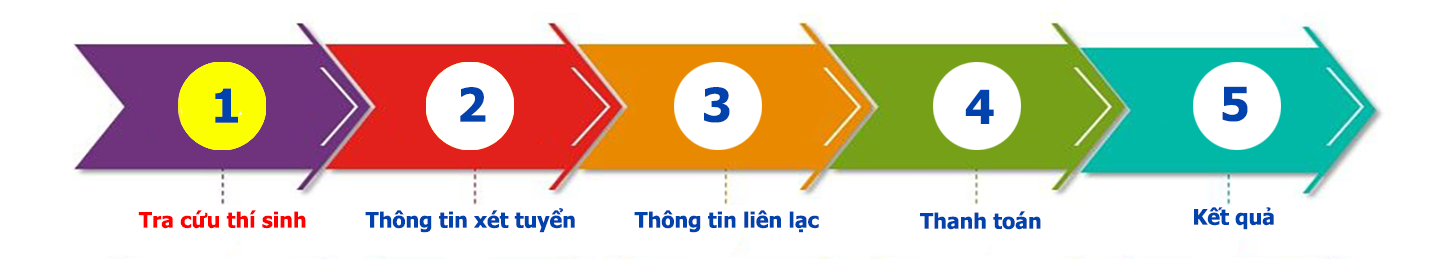
<style>
.page{position:relative;width:1434px;height:259px;background:#ffffff}
.page>*{position:absolute;margin:0}
.t1{font:46.7px "Tahoma-Bold";color:#0242ac}
.t2{font:21.3px "Tahoma-Bold";color:#0242ac}
.t3{font:21.3px "Tahoma-Bold";color:#ff0000}
</style>
<div class="page">
<p class="t1" style="left:215px;top:88px;width:23px;height:35px">1</p>
<p class="t1" style="left:460px;top:87px;width:26px;height:35px">2</p>
<p class="t1" style="left:704px;top:87px;width:26px;height:36px">3</p>
<p class="t1" style="left:965px;top:89px;width:29px;height:35px">4</p>
<p class="t1" style="left:1222px;top:86px;width:26px;height:36px">5</p>
<p class="t2" style="left:365px;top:208px;width:210px;height:25px">Thông tin xét tuyển</p>
<p class="t2" style="left:1194px;top:207px;width:80px;height:23px">Kết quả</p>
<p class="t3" style="left:138px;top:210px;width:168px;height:19px">Tra cứu thí sinh</p>
<p class="t2" style="left:634px;top:210px;width:185px;height:23px">Thông tin liên lạc</p>
<p class="t2" style="left:920px;top:211px;width:121px;height:19px">Thanh toán</p>
</div>
